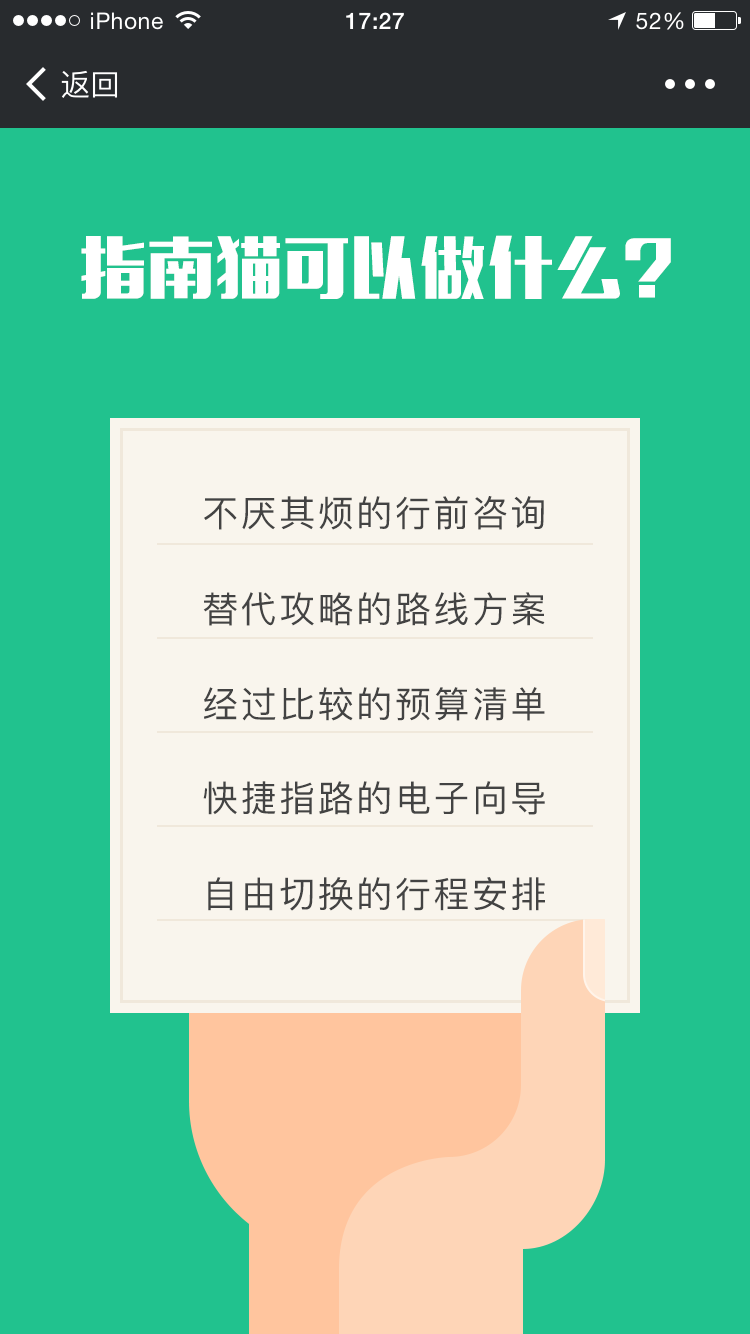
<style>
.page{position:relative;width:750px;height:1334px;background:#21c28e}
.page>*{position:absolute;margin:0}
.t1{font:66px "MFLiHei_Noncommercial-Regular";letter-spacing:0.03em;color:#ffffff}
.t2{font:36px "PingFangSC-Regular";letter-spacing:0.07em;color:#434343}
</style>
<div class="page">
<p class="t1" style="left:81px;top:235px;width:590px;height:64px">指南猫可以做什么?</p>
<p class="t2" style="left:204px;top:496px;width:340px;height:34px">不厌其烦的行前咨询</p>
<p class="t2" style="left:203px;top:592px;width:342px;height:34px">替代攻略的路线方案</p>
<p class="t2" style="left:204px;top:687px;width:341px;height:34px">经过比较的预算清单</p>
<p class="t2" style="left:203px;top:781px;width:342px;height:34px">快捷指路的电子向导</p>
<p class="t2" style="left:208px;top:877px;width:337px;height:34px">自由切换的行程安排</p>
</div>
